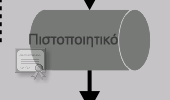
<style>
.page{position:relative;width:170px;height:100px;background:#c6c3c6}
.page>*{position:absolute;margin:0}
.t1{font:14.7px "ArialMT";color:#3b3c3b}
</style>
<div class="page">
<p class="t1" style="left:29px;top:33px;width:89px;height:15px">Πιστοποιητικό</p>
</div>
